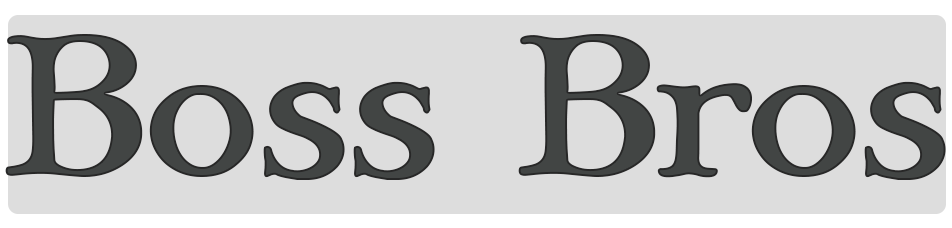
<style>
.page{position:relative;width:952px;height:228px;background:#dddddd}
.page>*{position:absolute;margin:0}
.t1{font:179.5px "MaryJaneAntique";color:#424544;scale:1.05 1}
</style>
<div class="page">
<p class="t1" style="left:5px;top:34px;width:941px;height:146px">Boss Bros</p>
</div>
